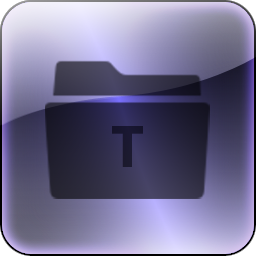
<style>
.page{position:relative;width:256px;height:256px}
.page>*{position:absolute;margin:0}
.t1{font:59.8px "MyriadPro-Bold";color:#1a182f}
</style>
<div class="page">
<p class="t1" style="left:112px;top:126px;width:31px;height:41px">T</p>
</div>
